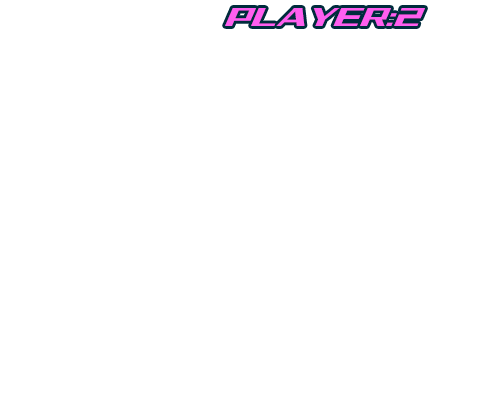
<style>
.page{position:relative;width:492px;height:400px;background:#ffffff}
.page>*{position:absolute;margin:0}
.t1{font:29.6px "2070POLYESTER-ALP51";color:#ff60f5;font-style:italic;scale:0.9 1}
</style>
<div class="page">
<p class="t1" style="left:225px;top:8px;width:200px;height:18px">PLAYER:2</p>
</div>
